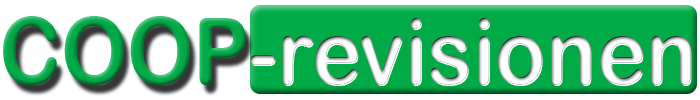
<style>
.page{position:relative;width:700px;height:100px;background:#00aa47}
.page>*{position:absolute;margin:0}
.t1{font:93px "ArialRoundedMTBold";color:#00aa47;scale:0.9 1}
.t2{font:93px "ArialRoundedMTBold";color:#fefefe;scale:0.9 1}
</style>
<div class="page">
<p class="t1" style="left:3px;top:16px;width:243px;height:69px">COOP</p>
<p class="t2" style="left:250px;top:18px;width:442px;height:68px">-revisionen</p>
</div>
